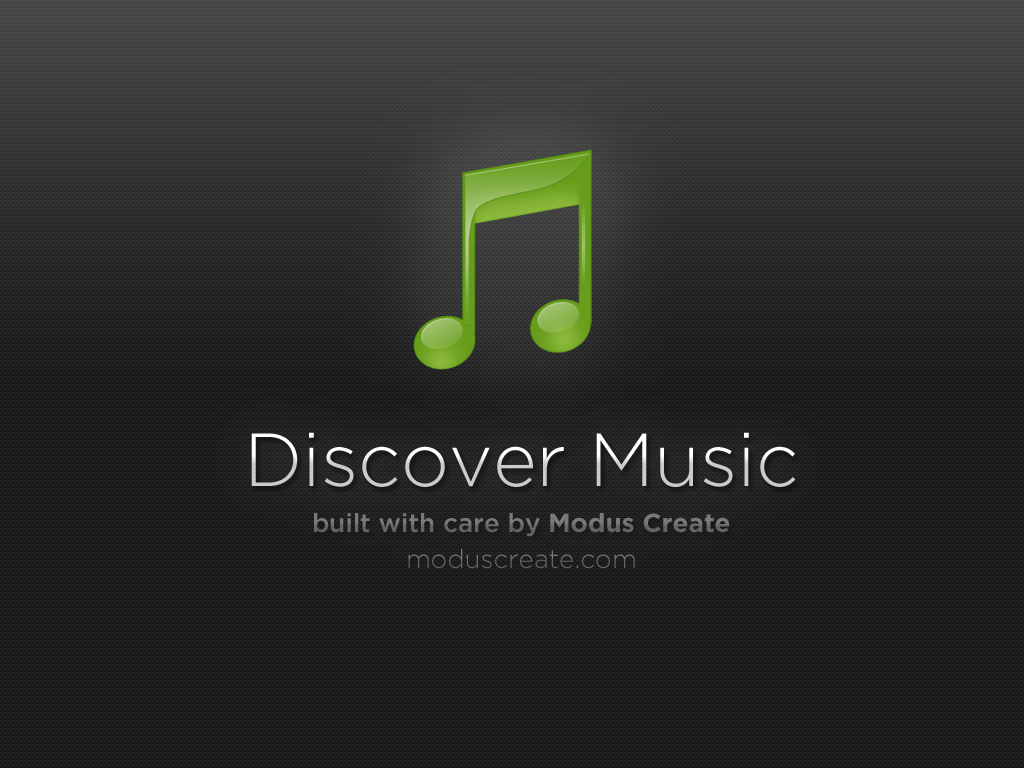
<style>
.page{position:relative;width:1024px;height:768px;background:#1a1a1a}
.page>*{position:absolute;margin:0}
.t1{font:75px "GothamHTF-Light"}
.t2{font:26px "GothamHTF-Medium";color:#717171}
.t3{font:26px "GothamHTF-Bold";color:#717171}
.t4{font:26px "GothamHTF-Light";color:#656665}
</style>
<div class="page">
<p class="t1" style="left:251px;top:432px;width:545px;height:55px">Discover Music</p>
<p class="t2" style="left:314px;top:513px;width:416px;height:24px">built with care by <span class="t3">Modus Create</span></p>
<p class="t4" style="left:408px;top:549px;width:227px;height:20px">moduscreate.com</p>
</div>
